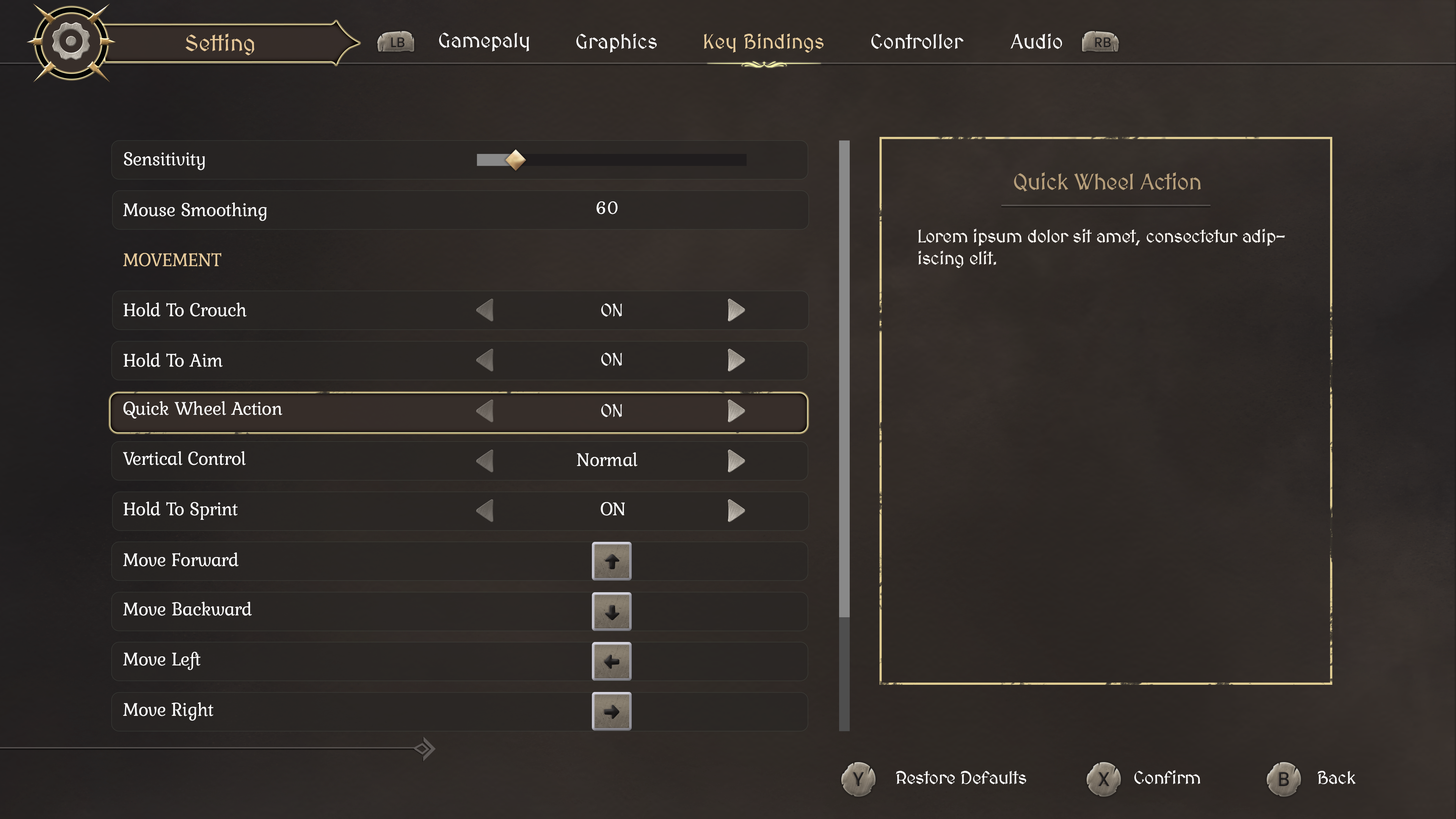
<style>
.page{position:relative;width:1456px;height:819px}
.page>*{position:absolute;margin:0}
.t1{font:22.7px "MedievalSharp";color:#e6c899}
.t2{font:20.5px "MedievalSharp";color:#fefefe}
.t3{font:20.5px "MedievalSharp";color:#ffffff}
.t4{font:20.5px "MedievalSharp";color:#e7cb9c}
.t5{font:19.2px "Kurale-Regular";letter-spacing:-0.02em;color:#ffffff}
.t6{font:22.7px "MedievalSharp";letter-spacing:-0.02em;color:#b79f7b}
.t7{font:18.2px "Kurale-Regular";letter-spacing:-0.02em;color:#ffffff}
.t8{font:18.2px "MedievalSharp";letter-spacing:-0.02em;color:#fffbf5}
.t9{font:19.2px "Kurale-Regular";letter-spacing:-0.02em;color:#e7cb9c}
.t10{font:18.2px "MedievalSharp";letter-spacing:-0.02em;color:#ffffff}
</style>
<div class="page">
<p class="t1" style="left:185px;top:33px;width:69px;height:22px">Setting</p>
<p class="t2" style="left:439px;top:33px;width:90px;height:19px">Gamepaly</p>
<p class="t3" style="left:576px;top:33px;width:81px;height:20px">Graphics</p>
<p class="t4" style="left:704px;top:33px;width:120px;height:20px">Key Bindings</p>
<p class="t3" style="left:871px;top:34px;width:93px;height:15px">Controller</p>
<p class="t3" style="left:1010px;top:33px;width:52px;height:16px">Audio</p>
<p class="t5" style="left:124px;top:152px;width:81px;height:18px">Sensitivity</p>
<p class="t6" style="left:1014px;top:172px;width:187px;height:19px">Quick Wheel Action</p>
<p class="t5" style="left:123px;top:202px;width:144px;height:19px">Mouse Smoothing</p>
<p class="t7" style="left:596px;top:201px;width:22px;height:13px">60</p>
<p class="t8" style="left:918px;top:229px;width:367px;height:39px">Lorem ipsum dolor sit amet, consectetur adipiscing elit.</p>
<p class="t9" style="left:123px;top:253px;width:98px;height:14px">MOVEMENT</p>
<p class="t5" style="left:123px;top:303px;width:124px;height:14px">Hold To Crouch</p>
<p class="t10" style="left:601px;top:303px;width:21px;height:14px">ON</p>
<p class="t5" style="left:123px;top:353px;width:100px;height:14px">Hold To Aim</p>
<p class="t10" style="left:601px;top:353px;width:21px;height:13px">ON</p>
<p class="t5" style="left:123px;top:401px;width:159px;height:18px">Quick Wheel Action</p>
<p class="t10" style="left:601px;top:404px;width:21px;height:13px">ON</p>
<p class="t5" style="left:123px;top:451px;width:123px;height:14px">Vertical Control</p>
<p class="t5" style="left:577px;top:452px;width:61px;height:14px">Normal</p>
<p class="t5" style="left:123px;top:502px;width:115px;height:18px">Hold To Sprint</p>
<p class="t5" style="left:601px;top:502px;width:24px;height:14px">ON</p>
<p class="t5" style="left:123px;top:552px;width:115px;height:14px">Move Forward</p>
<p class="t5" style="left:123px;top:602px;width:129px;height:14px">Move Backward</p>
<p class="t5" style="left:123px;top:652px;width:78px;height:18px">Move Left</p>
<p class="t5" style="left:123px;top:702px;width:90px;height:19px">Move Right</p>
<p class="t10" style="left:896px;top:771px;width:130px;height:13px">Restore Defaults</p>
<p class="t10" style="left:1134px;top:770px;width:66px;height:14px">Confirm</p>
<p class="t10" style="left:1318px;top:771px;width:38px;height:13px">Back</p>
</div>
